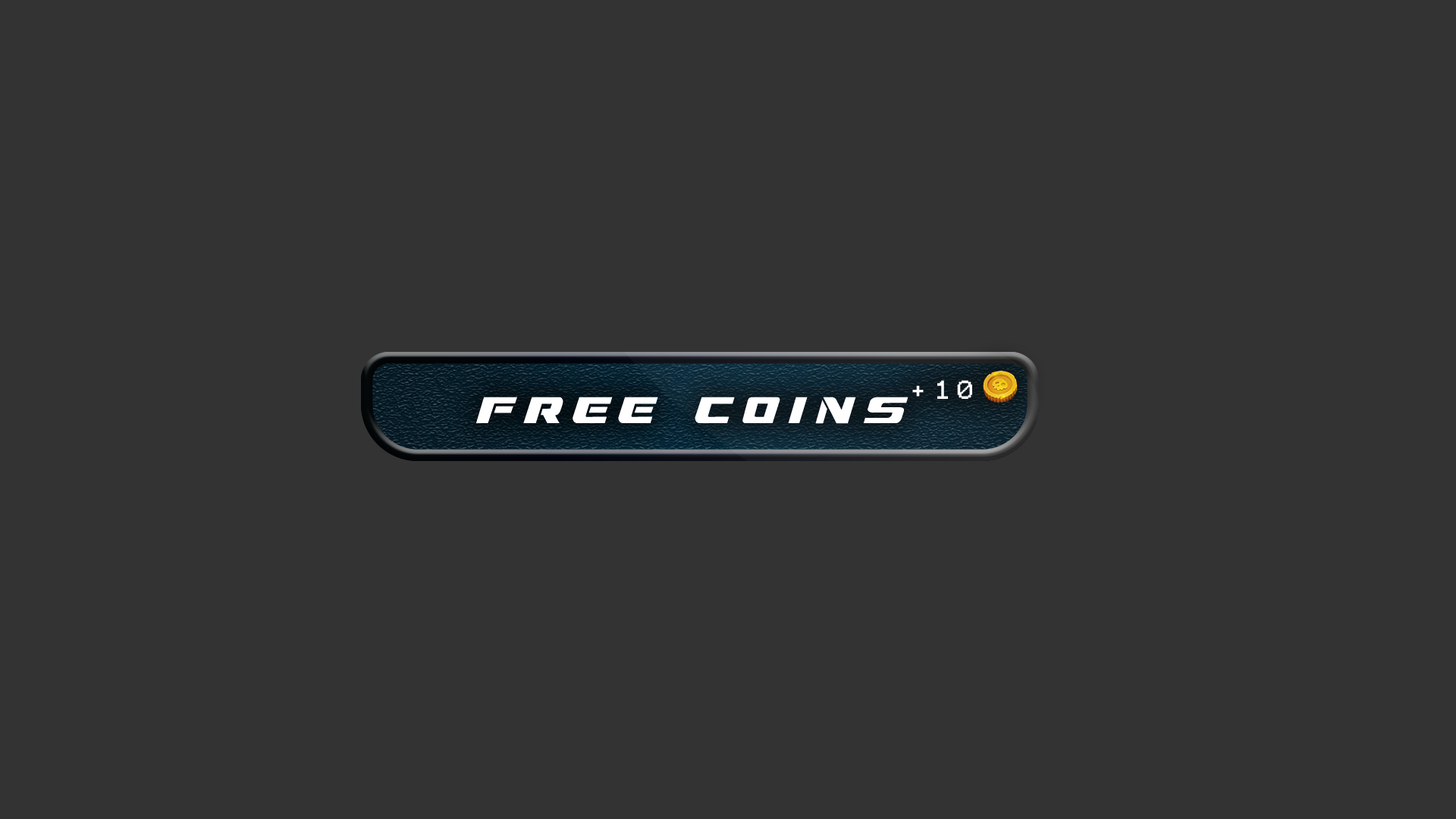
<style>
.page{position:relative;width:1456px;height:819px;background:#333333}
.page>*{position:absolute;margin:0}
.t1{font:21px "Terminal";letter-spacing:0.34em;color:#ffffff}
.t2{font:36.9px "DreamMMA";letter-spacing:0.34em;color:#ffffff}
</style>
<div class="page">
<p class="t1" style="left:912px;top:380px;width:60px;height:19px">+10</p>
<p class="t2" style="left:476px;top:397px;width:432px;height:27px">free coins</p>
</div>
